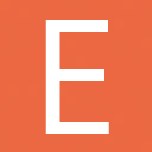
<style>
.page{position:relative;width:152px;height:152px;background:#eb6842}
.page>*{position:absolute;margin:0}
.t1{font:163.4px "PTSans-Regular";letter-spacing:0.04em;color:#ffffff;text-transform:uppercase}
</style>
<div class="page">
<p class="t1" style="left:45px;top:20px;width:64px;height:114px">E</p>
</div>
